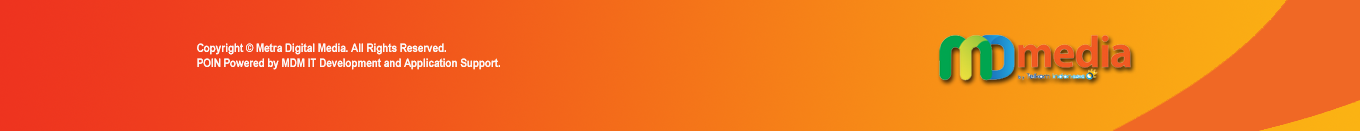
<style>
.page{position:relative;width:1360px;height:131px}
.page>*{position:absolute;margin:0}
.t1{font:12px "ArialNarrow-Bold";color:#fbf7f7}
</style>
<div class="page">
<p class="t1" style="left:197px;top:43px;width:303px;height:27px">Copyright © Metra Digital Media. All Rights Reserved.<br>POIN Powered by MDM IT Development and Application Support.</p>
</div>
